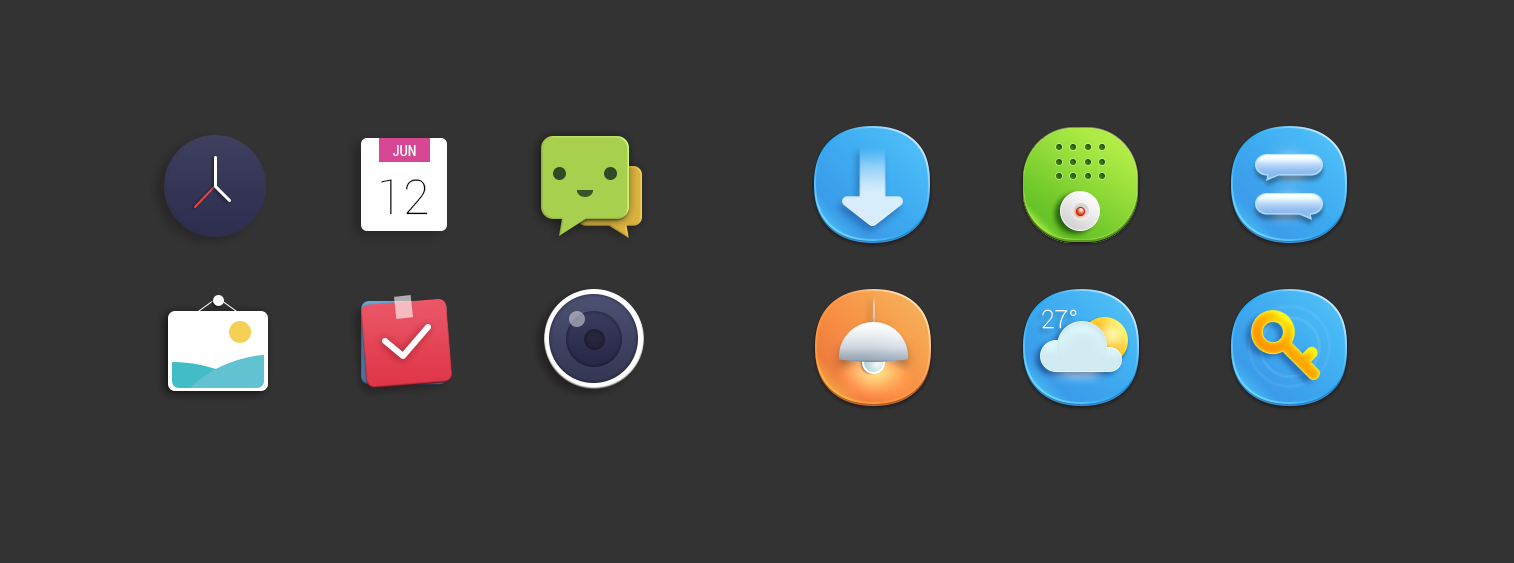
<style>
.page{position:relative;width:1514px;height:563px;background:#333333}
.page>*{position:absolute;margin:0}
.t1{font:14px "Roboto-Condensed";color:#ffffff}
.t2{font:48px "Roboto-Thin";color:#040000}
.t3{font:25px "Roboto-Thin";color:#fefefe}
</style>
<div class="page">
<p class="t1" style="left:393px;top:145px;width:23px;height:11px">JUN</p>
<p class="t2" style="left:381px;top:179px;width:47px;height:36px">12</p>
<p class="t3" style="left:1042px;top:309px;width:35px;height:20px">27°</p>
</div>
